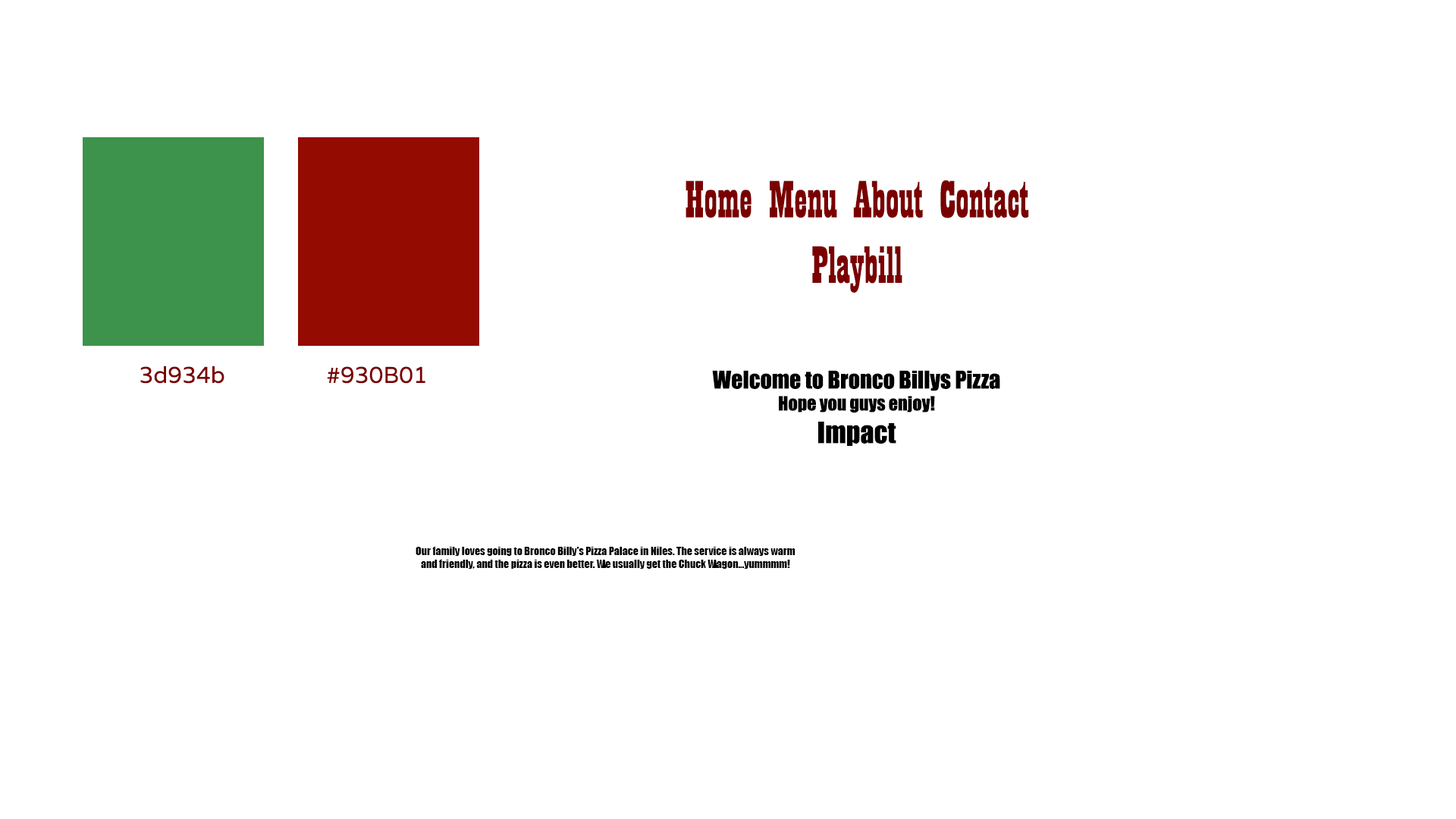
<style>
.page{position:relative;width:1456px;height:819px;background:#ffffff}
.page>*{position:absolute;margin:0}
.t1{font:54.6px "Playbill";color:#7a0000}
.t2{font:22.7px "Varela";color:#7a0000}
.t3{font:22.7px "Impact";color:#000000}
.t4{font:18.2px "Impact";color:#000000}
.t5{font:27.3px "Impact";color:#000000}
.t6{font:10.6px "Impact";color:#000000}
</style>
<div class="page">
<p class="t1" style="left:686px;top:180px;width:343px;height:113px;text-align:center">Home Menu About Contact<br>Playbill</p>
<p class="t2" style="left:140px;top:366px;width:84px;height:18px">3d934b</p>
<p class="t2" style="left:327px;top:366px;width:98px;height:18px">#930B01</p>
<p class="t3" style="left:712px;top:370px;width:288px;height:76px;text-align:center">Welcome to Bronco Billys Pizza <br><span class="t4">Hope you guys enjoy!<br></span><span class="t5">Impact</span></p>
<p class="t6" style="left:416px;top:547px;width:379px;height:22px;text-align:center">Our family loves going to Bronco Billy's Pizza Palace in Niles. The service is always warm and friendly, and the pizza is even better. We usually get the Chuck Wagon...yummmm!</p>
</div>
